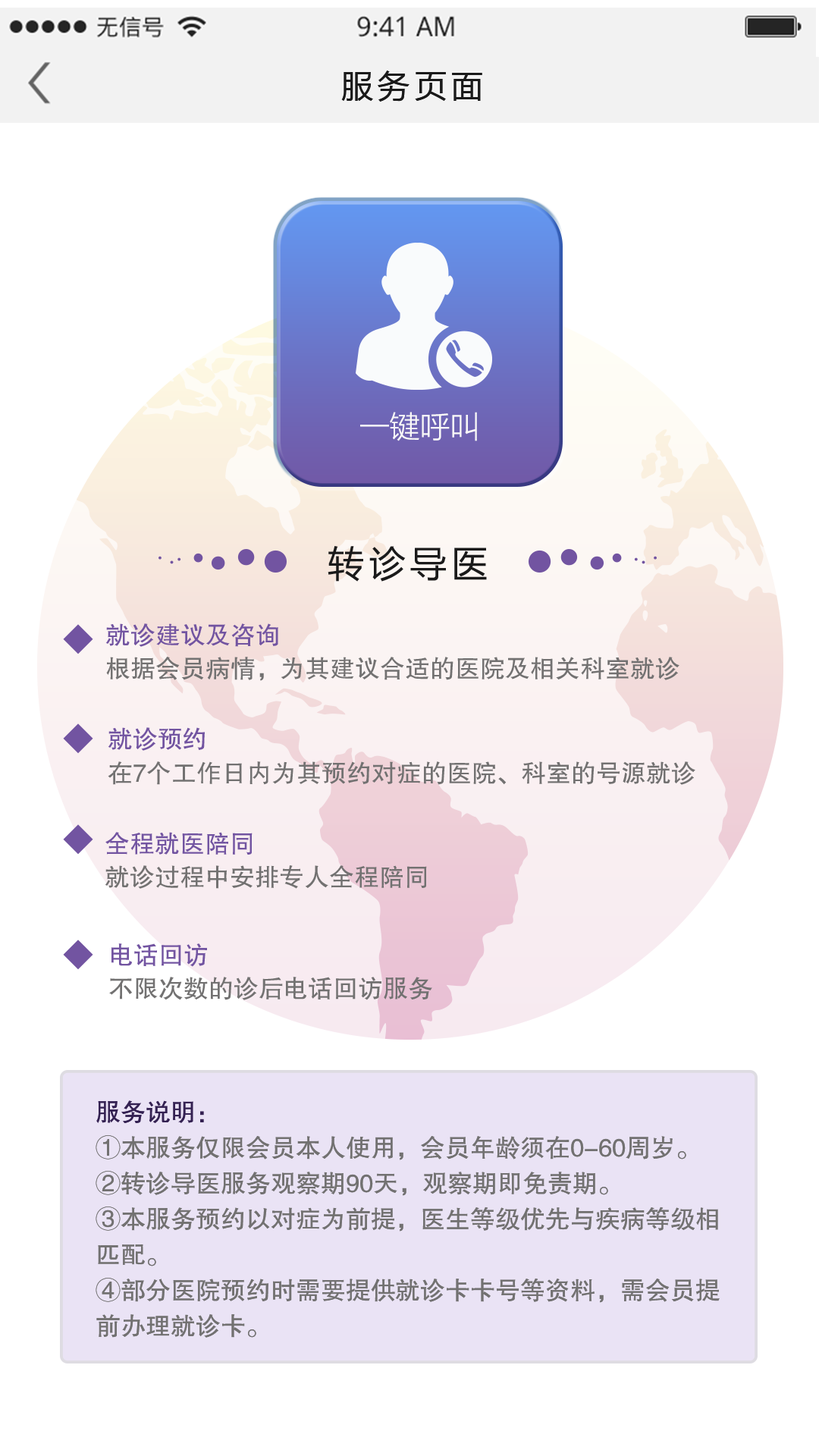
<style>
.page{position:relative;width:819px;height:1456px;background:#ffffff}
.page>*{position:absolute;margin:0}
.t1{font:32.1px "MicrosoftYaHeiUI";letter-spacing:0.14em;color:#1a1a1a}
.t2{font:30.3px "MicrosoftYaHeiUILight";color:#f9f8f8;text-transform:uppercase}
.t3{font:36.4px "MicrosoftYaHeiUI";letter-spacing:0.14em;color:#1a1a1a}
.t4{font:25px/33.4px "FZHTK--GBK1-0";color:#727171}
.t5{font:25px/33.4px "FZHTK--GBK1-0";color:#7254a1}
.t6{font:25px/33.6px "FZHTK--GBK1-0";color:#727171}
.t7{font:25px/26.7px "FZHTK--GBK1-0";color:#7254a1}
.t8{font:25px/35.7px "FZHTK--GBK1-0";color:#727171}
.t9{font:25px/35.7px "FZHTK--GBK1-0";color:#342152}
</style>
<div class="page">
<p class="t1" style="left:341px;top:71px;width:141px;height:31px">服务页面</p>
<p class="t2" style="left:360px;top:412px;width:117px;height:29px">一键呼叫</p>
<p class="t3" style="left:328px;top:546px;width:159px;height:36px">转诊导医</p>
<p class="t4" style="left:105px;top:623px;width:574px;height:58px"><span class="t5">就诊建议及咨询<br></span>根据会员病情，为其建议合适的医院及相关科室就诊</p>
<p class="t6" style="left:108px;top:727px;width:587px;height:58px"><span class="t7">就诊预约<br></span>在7个工作日内为其预约对症的医院、科室的号源就诊</p>
<p class="t6" style="left:105px;top:832px;width:322px;height:57px"><span class="t7">全程就医陪同<br></span>就诊过程中安排专人全程陪同</p>
<p class="t6" style="left:109px;top:943px;width:323px;height:57px"><span class="t7">电话回访<br></span>不限次数的诊后电话回访服务</p>
<p class="t8" style="left:96px;top:1100px;width:624px;height:238px"><span class="t9">服务说明：<br></span>①本服务仅限会员本人使用，会员年龄须在0-60周岁。②转诊导医服务观察期90天，观察期即免责期。<br>③本服务预约以对症为前提，医生等级优先与疾病等级相匹配。<br>④部分医院预约时需要提供就诊卡卡号等资料，需会员提前办理就诊卡。</p>
</div>
